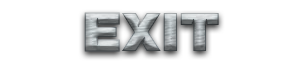
<style>
.page{position:relative;width:300px;height:64px;background:#ffffff}
.page>*{position:absolute;margin:0}
.t1{font:60px "BananaBrick"}
</style>
<div class="page">
<p class="t1" style="left:84px;top:12px;width:135px;height:40px">Exit</p>
</div>
